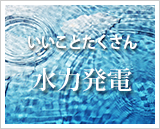
<style>
.page{position:relative;width:160px;height:129px}
.page>*{position:absolute;margin:0}
.t1{font:16px "KozGoPr6N-Bold";letter-spacing:-0.05em;color:#ffffff;scale:0.9 1}
.t2{font:25px "KozMinPro-Bold";color:#ffffff}
</style>
<div class="page">
<p class="t1" style="left:28px;top:34px;width:109px;height:15px">いいことたくさん</p>
<p class="t2" style="left:32px;top:67px;width:100px;height:25px">水力発電</p>
</div>
